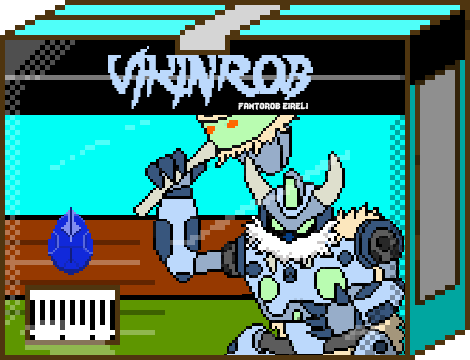
<style>
.page{position:relative;width:470px;height:360px}
.page>*{position:absolute;margin:0}
.t1{font:48px "Lady-Radical";color:#bcd9fc;scale:0.72 1}
.t2{font:12px "Lady-Radical";color:#fbfbfb}
</style>
<div class="page">
<p class="t1" style="left:108px;top:46px;width:205px;height:63px">VIKINROB</p>
<p class="t2" style="left:238px;top:102px;width:70px;height:8px">fantorob eireli</p>
</div>
